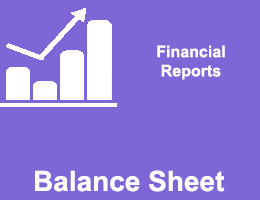
<style>
.page{position:relative;width:260px;height:200px;background:#7e66d6}
.page>*{position:absolute;margin:0}
.t1{font:16px "Arial-BoldMT";color:#ffffff}
.t2{font:28px "Arial-BoldMT";color:#ffffff}
</style>
<div class="page">
<p class="t1" style="left:157px;top:45px;width:68px;height:35px;text-align:center">Financial<br>Reports</p>
<p class="t2" style="left:35px;top:170px;width:190px;height:22px">Balance Sheet</p>
</div>
